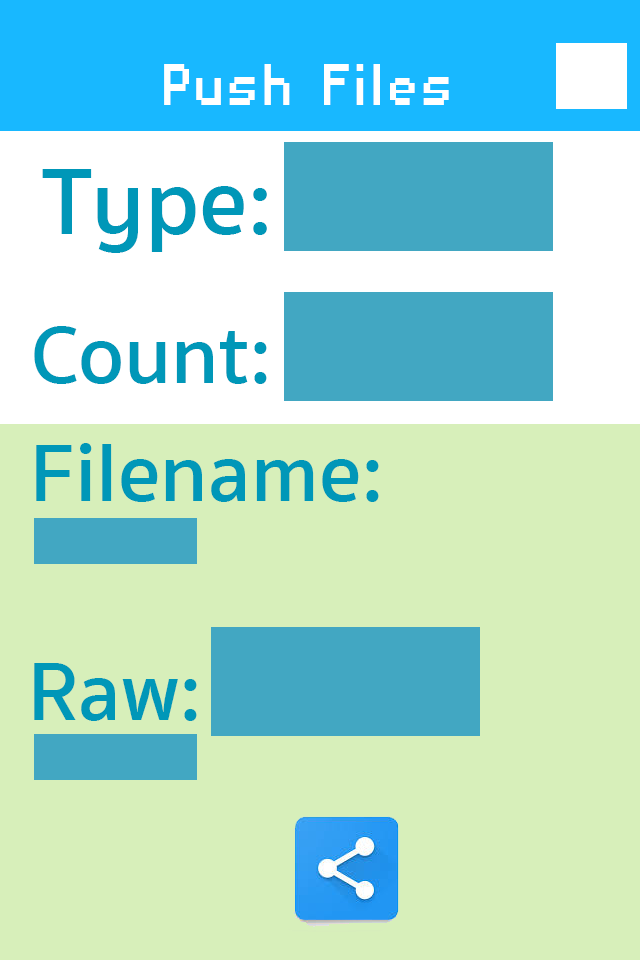
<style>
.page{position:relative;width:640px;height:960px;background:#d7efba}
.page>*{position:absolute;margin:0}
.t1{font:76.6px "DisposableDroidBB";color:#ffffff;scale:0.91 1}
.t2{font:95.7px "SukhumvitSet-SemiBold";color:#0097b8}
.t3{font:84.2px "SukhumvitSet-SemiBold";color:#0097b8}
</style>
<div class="page">
<p class="t1" style="left:164px;top:64px;width:285px;height:41px">Push Files</p>
<p class="t2" style="left:42px;top:169px;width:225px;height:84px">Type:</p>
<p class="t3" style="left:34px;top:326px;width:233px;height:58px">Count:</p>
<p class="t3" style="left:36px;top:443px;width:343px;height:59px">Filename:</p>
<p class="t3" style="left:34px;top:663px;width:163px;height:58px">Raw:</p>
</div>
